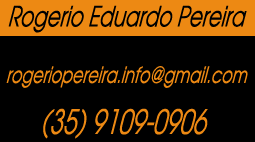
<style>
.page{position:relative;width:255px;height:142px;background:#000000}
.page>*{position:absolute;margin:0}
.t1{font:28px "AvantGarde-BookOblique";color:#000000;font-style:italic;scale:0.71 1}
.t2{font:22.4px "AvantGarde-BookOblique";color:#ed8913;font-style:italic;scale:0.71 1}
.t3{font:33.6px "AvantGarde-BookOblique";color:#ed8913;font-style:italic;scale:0.71 1}
</style>
<div class="page">
<p class="t1" style="left:8px;top:5px;width:239px;height:28px">Rogerio Eduardo Pereira</p>
<p class="t2" style="left:6px;top:66px;width:242px;height:22px">rogeriopereira.info@gmail.com</p>
<p class="t3" style="left:43px;top:108px;width:165px;height:31px">(35) 9109-0906</p>
</div>
